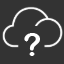
<style>
.page{position:relative;width:64px;height:64px;background:#333333}
.page>*{position:absolute;margin:0}
.t1{font:32.3px "ArialRoundedMTBold";color:#ffffff}
</style>
<div class="page">
<p class="t1" style="left:24px;top:33px;width:16px;height:23px">?</p>
</div>
